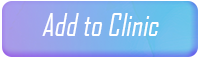
<style>
.page{position:relative;width:200px;height:60px}
.page>*{position:absolute;margin:0}
.t1{font:30px "AgencyFB-Reg";color:#ffffff;font-style:italic}
</style>
<div class="page">
<p class="t1" style="left:42px;top:13px;width:117px;height:23px">Add to Clinic</p>
</div>
